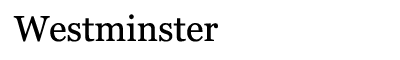
<style>
.page{position:relative;width:400px;height:60px;background:#ffffff}
.page>*{position:absolute;margin:0}
.t1{font:36px "Georgia";color:#000000}
</style>
<div class="page">
<p class="t1" style="left:13px;top:14px;width:205px;height:28px">Westminster</p>
</div>
